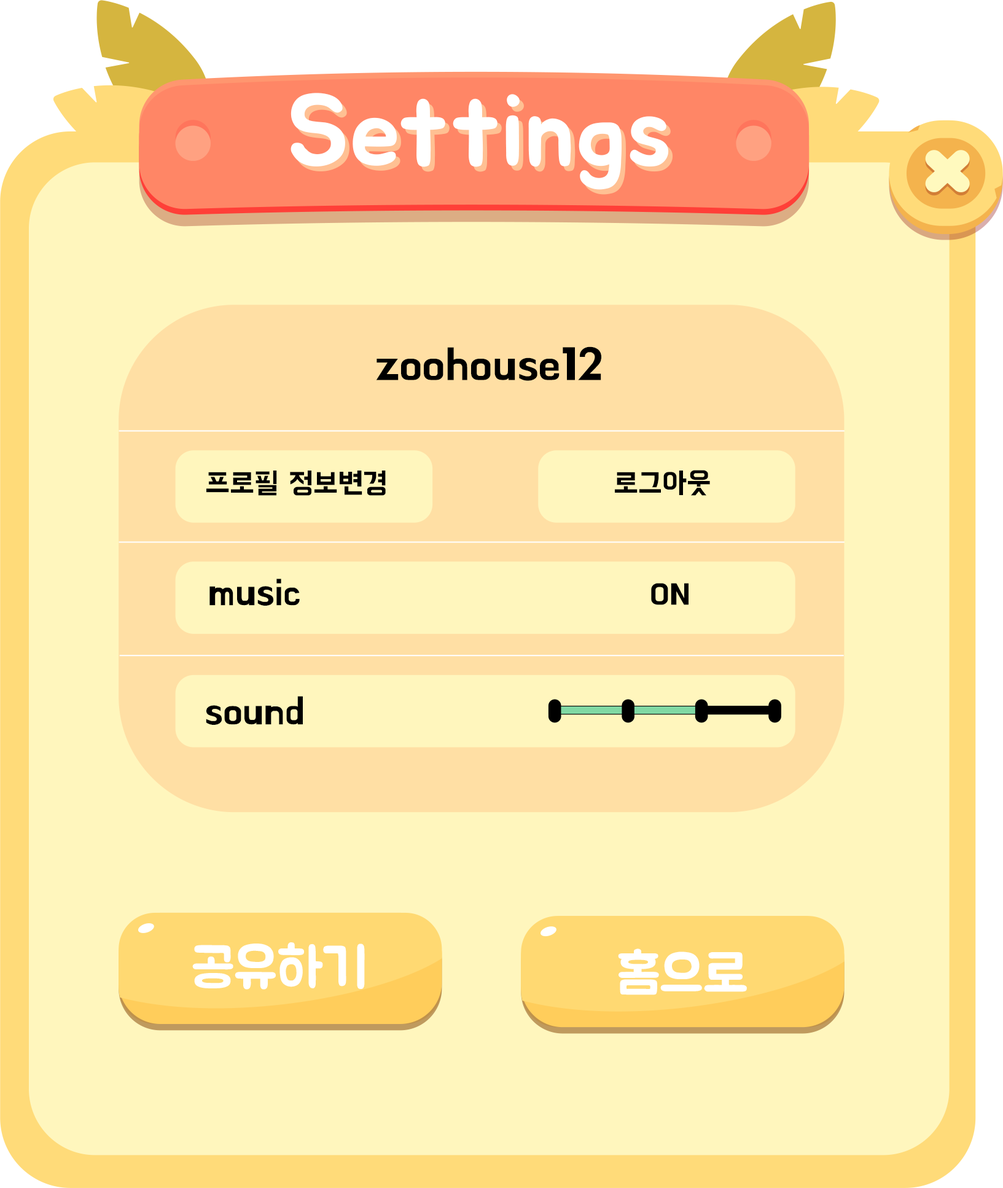
<style>
.page{position:relative;width:1003px;height:1188px;background:#fff6bd}
.page>*{position:absolute;margin:0}
.t1{font:102.4px "BMJUA";color:#ffffff}
.t2{font:102.4px "BMJUA"}
.t3{font:44.8px "BMHANNAPro";color:#000000}
.t4{font:29.4px "BMHANNAPro";color:#000000}
.t5{font:38.4px "BMHANNAPro";color:#000000}
.t6{font:55px "BMJUA";color:#ffffff}
</style>
<div class="page">
<p class="t1" style="left:291px;top:93px;width:378px;height:97px">Settings</p>
<p class="t2" style="left:295px;top:98px;width:378px;height:97px">Settings</p>
<p class="t3" style="left:376px;top:347px;width:226px;height:34px">zoohouse12</p>
<p class="t4" style="left:206px;top:471px;width:180px;height:25px">프로필 정보변경</p>
<p class="t4" style="left:615px;top:470px;width:95px;height:26px">로그아웃</p>
<p class="t5" style="left:210px;top:579px;width:90px;height:27px">music</p>
<p class="t4" style="left:651px;top:583px;width:38px;height:22px">ON</p>
<p class="t5" style="left:206px;top:696px;width:97px;height:29px">sound</p>
<p class="t6" style="left:192px;top:943px;width:173px;height:47px">공유하기</p>
<p class="t6" style="left:618px;top:949px;width:129px;height:46px">홈으로</p>
</div>
